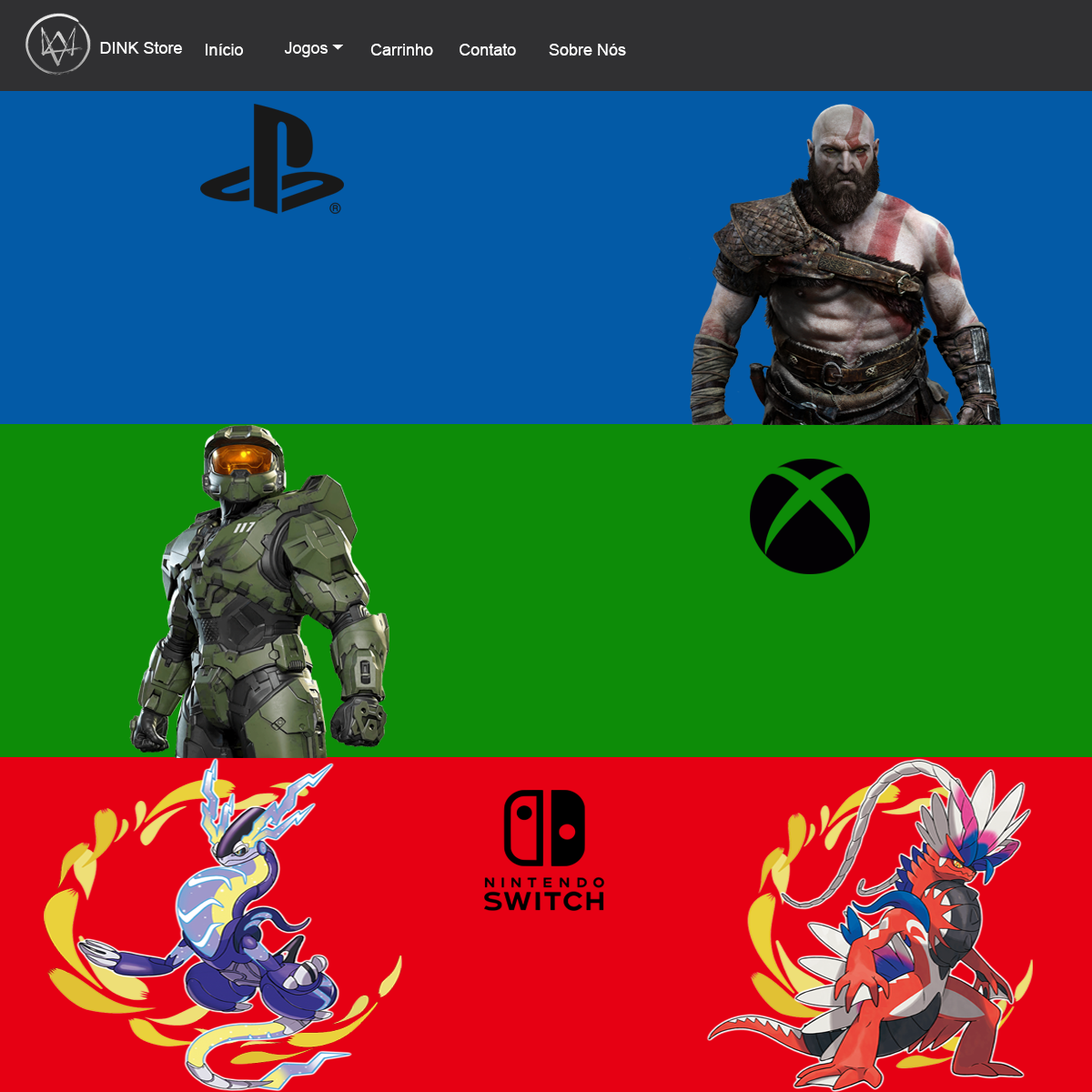
<style>
.page{position:relative;width:1092px;height:1092px;background:#035aa6}
.page>*{position:absolute;margin:0}
.t1{font:16.4px "ArialMT";color:#ffffff}
</style>
<div class="page">
<p class="t1" style="left:100px;top:42px;width:82px;height:12px">DINK Store</p>
<p class="t1" style="left:206px;top:44px;width:37px;height:12px">Início</p>
<p class="t1" style="left:370px;top:44px;width:63px;height:12px">Carrinho</p>
<p class="t1" style="left:460px;top:44px;width:56px;height:12px">Contato</p>
<p class="t1" style="left:549px;top:44px;width:77px;height:12px">Sobre Nós</p>
</div>
